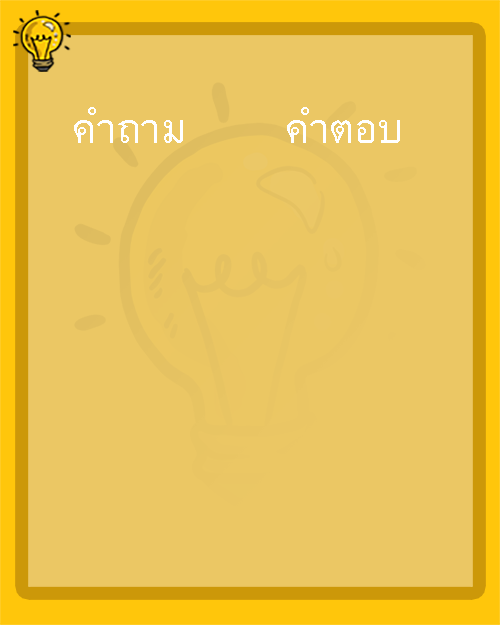
<style>
.page{position:relative;width:500px;height:625px;background:#ebc764}
.page>*{position:absolute;margin:0}
.t1{font:58.3px "BrowalliaNew";color:#ffffff}
</style>
<div class="page">
<p class="t1" style="left:74px;top:107px;width:109px;height:36px">คำถาม</p>
<p class="t1" style="left:287px;top:107px;width:113px;height:36px">คำตอบ</p>
</div>
